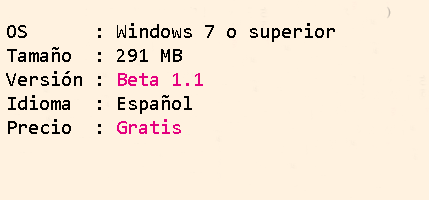
<style>
.page{position:relative;width:429px;height:200px;background:#fff2e0}
.page>*{position:absolute;margin:0}
.t1{font:20px "Consolas";color:#000000}
.t2{font:20px "Consolas";color:#e4007f}
</style>
<div class="page">
<p class="t1" style="left:6px;top:23px;width:329px;height:111px">OS      : Windows 7 o superior<br>Tamaño  : 291 MB<br>Versión : <span class="t2">Beta 1.1<br></span>Idioma  : Español<br>Precio  : <span class="t2">Gratis</span></p>
</div>
